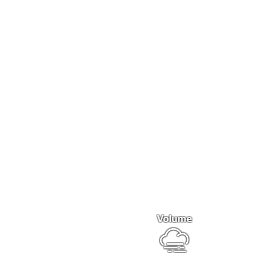
<style>
.page{position:relative;width:256px;height:256px;background:#ffffff}
.page>*{position:absolute;margin:0}
.t1{font:11px "Calibri-Bold";color:#ffffff}
</style>
<div class="page">
<p class="t1" style="left:157px;top:215px;width:35px;height:7px">Volume</p>
</div>
